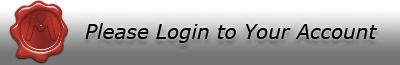
<style>
.page{position:relative;width:400px;height:65px}
.page>*{position:absolute;margin:0}
.t1{font:20px "Verdana-Italic";color:#000000}
</style>
<div class="page">
<p class="t1" style="left:85px;top:23px;width:293px;height:20px">Please Login to Your Account</p>
</div>
